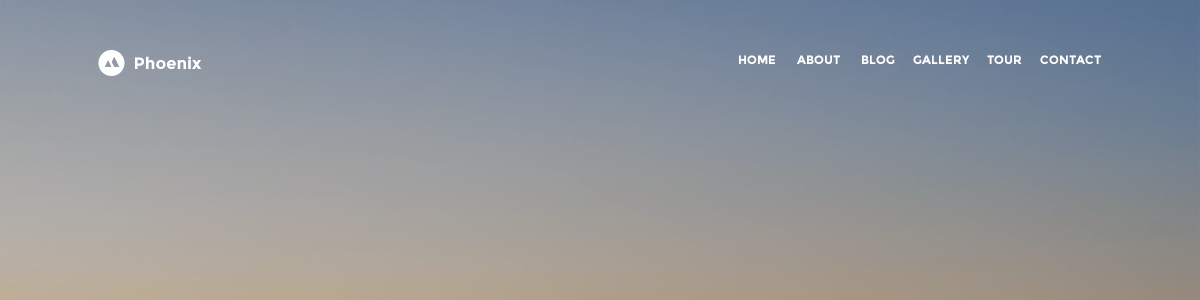
<style>
.page{position:relative;width:1200px;height:300px}
.page>*{position:absolute;margin:0}
.t1{font:16.4px "Montserrat-Bold";color:#ffffff}
.t2{font:12px "Montserrat-Bold";color:#ffffff;text-transform:uppercase}
</style>
<div class="page">
<p class="t1" style="left:135px;top:56px;width:66px;height:13px">Phoenix</p>
<p class="t2" style="left:739px;top:55px;width:362px;height:9px">Home       About       Blog      Gallery      TOUR      Contact</p>
</div>
